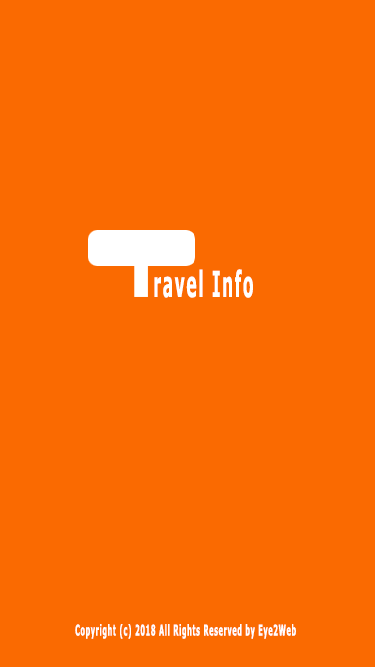
<style>
.page{position:relative;width:375px;height:667px;background:#fa6a01}
.page>*{position:absolute;margin:0}
.t1{font:36px "Verdana-Bold";letter-spacing:0.1em;color:#ffffff;scale:0.43 1}
.t2{font:15px "Verdana-Bold";letter-spacing:0.1em;color:#ffffff;scale:0.43 1}
</style>
<div class="page">
<p class="t1" style="left:154px;top:269px;width:99px;height:29px">ravel Info</p>
<p class="t2" style="left:75px;top:624px;width:221px;height:15px">Copyright (c) 2018 All Rights Reserved by Eye2Web</p>
</div>
